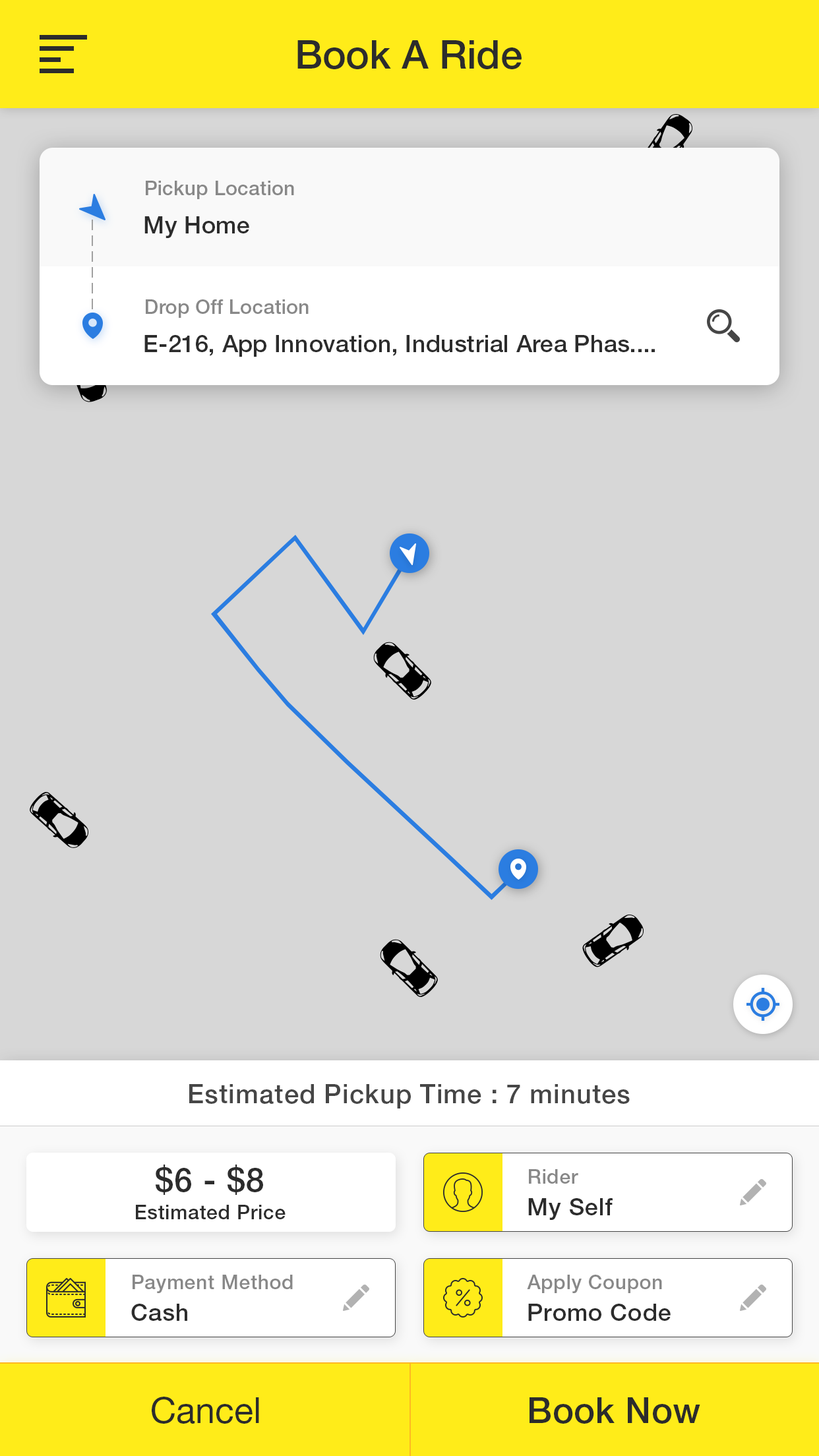
<style>
.page{position:relative;width:819px;height:1456px;background:#d7d7d7}
.page>*{position:absolute;margin:0}
.t1{font:39.6px "HelveticaNeueLTStd-Md";color:#2c2c2c}
.t2{font:19.8px "HelveticaNeueLTStd-Md";letter-spacing:0.01em;color:#888888}
.t3{font:23.7px "HelveticaNeueLTStd-Md";letter-spacing:0.01em;color:#2c2c2c}
.t4{font:26.4px "HelveticaNeueLTStd-Md";letter-spacing:0.025em;color:#464646}
.t5{font:19.8px/27.7px "HelveticaNeueLTStd-Md";letter-spacing:0.025em;color:#2c2c2c}
.t6{font:33px/27.7px "HelveticaNeueLTStd-Md";letter-spacing:0.025em;color:#2c2c2c}
.t7{font:19.8px "HelveticaNeueLTStd-Md";letter-spacing:0.025em;color:#888888}
.t8{font:23.7px "HelveticaNeueLTStd-Md";letter-spacing:0.025em;color:#2c2c2c}
.t9{font:35.6px "HelveticaNeueLTStd-Roman";color:#2c2c2c}
.t10{font:35.6px "HelveticaNeueLTStd-Md";letter-spacing:0.01em;color:#2c2c2c}
</style>
<div class="page">
<p class="t1" style="left:297px;top:40px;width:225px;height:29px">Book A Ride</p>
<p class="t2" style="left:146px;top:181px;width:148px;height:18px">Pickup Location</p>
<p class="t3" style="left:144px;top:216px;width:105px;height:22px">My Home</p>
<p class="t2" style="left:146px;top:299px;width:163px;height:19px">Drop Off Location</p>
<p class="t3" style="left:144px;top:335px;width:511px;height:22px">E-216, App Innovation, Industrial Area Phas....</p>
<p class="t4" style="left:189px;top:1084px;width:441px;height:24px">Estimated Pickup Time : 7 minutes</p>
<p class="t5" style="left:136px;top:1165px;width:150px;height:54px;text-align:center"><span class="t6">$6 - $8<br></span>Estimated Price</p>
<p class="t7" style="left:529px;top:1169px;width:49px;height:15px">Rider</p>
<p class="t8" style="left:528px;top:1198px;width:85px;height:22px">My Self</p>
<p class="t7" style="left:133px;top:1275px;width:160px;height:18px">Payment Method</p>
<p class="t7" style="left:527px;top:1275px;width:135px;height:18px">Apply Coupon</p>
<p class="t8" style="left:131px;top:1304px;width:56px;height:17px">Cash</p>
<p class="t8" style="left:528px;top:1304px;width:143px;height:17px">Promo Code</p>
<p class="t9" style="left:152px;top:1397px;width:107px;height:27px">Cancel</p>
<p class="t10" style="left:530px;top:1397px;width:170px;height:27px">Book Now</p>
</div>
